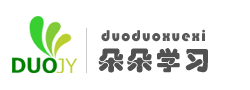
<style>
.page{position:relative;width:250px;height:90px;background:#ffffff}
.page>*{position:absolute;margin:0}
.t1{font:16px "STHupo";letter-spacing:0.075em;color:#585858}
.t2{font:26px "STHupo";letter-spacing:0.1em;color:#515151}
</style>
<div class="page">
<p class="t1" style="left:101px;top:29px;width:104px;height:13px">duoduoxuexi</p>
<p class="t2" style="left:98px;top:48px;width:110px;height:25px">朵朵学习</p>
</div>
